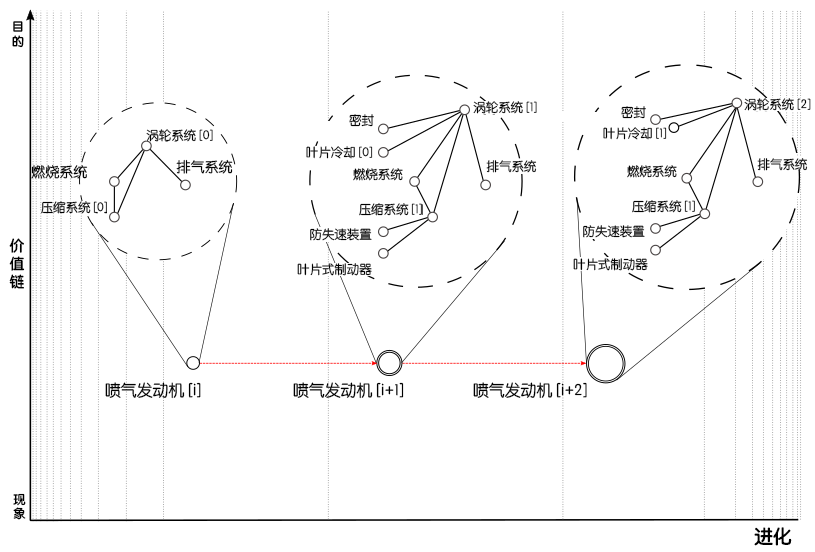
<style>
.page{position:relative;width:815px;height:552px;background:#ffffff}
.page>*{position:absolute;margin:0}
.t1{font:12.2px "STYuanti-SC-Bold";color:#000000}
.t2{font:12.4px "STYuanti-SC-Regular";color:#000000}
.t3{font:14px "STYuanti-SC-Regular";color:#000000}
.t4{font:14.7px "STYuanti-SC-Bold";color:#000000}
.t5{font:16px "STYuanti-SC-Regular";color:#000000}
.t6{font:18.7px "STYuanti-SC-Bold";color:#000000}
</style>
<div class="page">
<p class="t1" style="left:12px;top:21px;width:12px;height:27px">目<br>的</p>
<p class="t2" style="left:473px;top:101px;width:64px;height:13px">涡轮系统 [1]</p>
<p class="t2" style="left:744px;top:98px;width:67px;height:13px">涡轮系统 [2]</p>
<p class="t2" style="left:621px;top:106px;width:25px;height:13px">密封</p>
<p class="t2" style="left:349px;top:114px;width:25px;height:13px">密封</p>
<p class="t2" style="left:146px;top:129px;width:67px;height:13px">涡轮系统 [0]</p>
<p class="t2" style="left:603px;top:127px;width:64px;height:13px">叶片冷却 [1]</p>
<p class="t2" style="left:306px;top:146px;width:67px;height:13px">叶片冷却 [0]</p>
<p class="t3" style="left:176px;top:159px;width:57px;height:15px">排气系统</p>
<p class="t2" style="left:486px;top:160px;width:51px;height:13px">排气系统</p>
<p class="t2" style="left:757px;top:158px;width:51px;height:13px">排气系统</p>
<p class="t3" style="left:31px;top:165px;width:57px;height:14px">燃烧系统</p>
<p class="t2" style="left:353px;top:168px;width:50px;height:13px">燃烧系统</p>
<p class="t2" style="left:627px;top:165px;width:50px;height:13px">燃烧系统</p>
<p class="t2" style="left:41px;top:201px;width:66px;height:13px">压缩系统 [0]</p>
<p class="t2" style="left:359px;top:203px;width:63px;height:13px">压缩系统 [1]</p>
<p class="t2" style="left:632px;top:200px;width:63px;height:13px">压缩系统 [1]</p>
<p class="t2" style="left:310px;top:228px;width:62px;height:13px">防失速装置</p>
<p class="t2" style="left:583px;top:225px;width:62px;height:13px">防失速装置</p>
<p class="t4" style="left:9px;top:238px;width:16px;height:51px">价<br>值<br>链</p>
<p class="t2" style="left:297px;top:263px;width:75px;height:13px">叶片式制动器</p>
<p class="t2" style="left:573px;top:258px;width:75px;height:13px">叶片式制动器</p>
<p class="t5" style="left:105px;top:382px;width:96px;height:17px">喷气发动机 [i]</p>
<p class="t5" style="left:293px;top:382px;width:111px;height:17px">喷气发动机 [i+1]</p>
<p class="t5" style="left:473px;top:382px;width:114px;height:17px">喷气发动机 [i+2]</p>
<p class="t1" style="left:13px;top:493px;width:13px;height:27px">现<br>象</p>
<p class="t6" style="left:754px;top:527px;width:38px;height:19px">进化</p>
</div>
